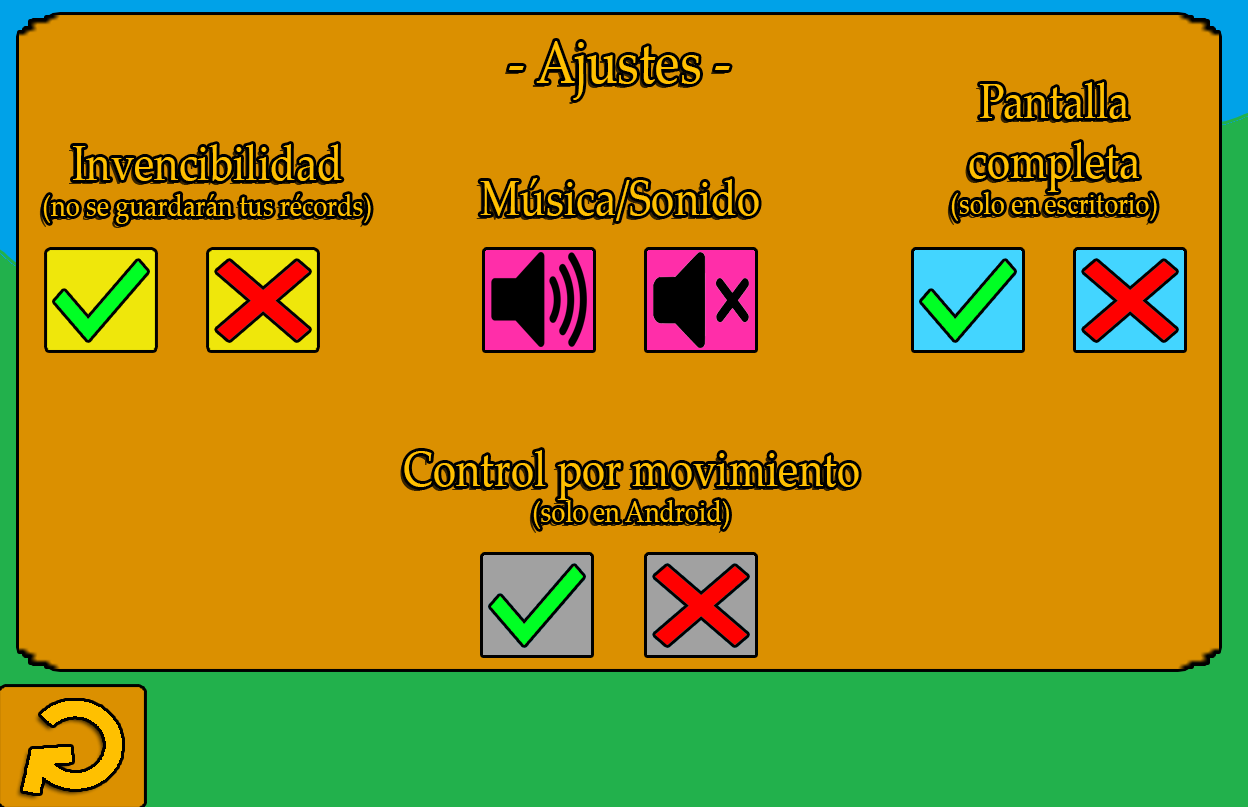
<style>
.page{position:relative;width:1248px;height:807px;background:#db9000}
.page>*{position:absolute;margin:0}
.t1{font:60px "PalatinoLinotype-Roman";color:#ffc000;scale:0.84 1}
.t2{font:30px "PalatinoLinotype-Roman";color:#ffc000;scale:0.84 1}
.t3{font:50px "PalatinoLinotype-Roman";color:#ffc000;scale:0.84 1}
</style>
<div class="page">
<p class="t1" style="left:509px;top:41px;width:221px;height:59px">- Ajustes -</p>
<p class="t2" style="left:951px;top:82px;width:206px;height:139px;text-align:center"><span class="t3">Pantalla<br>completa<br></span>(solo en escritorio)</p>
<p class="t2" style="left:43px;top:144px;width:328px;height:80px;text-align:center"><span class="t3">Invencibilidad<br></span>(no se guardarán tus récords)</p>
<p class="t3" style="left:480px;top:178px;width:279px;height:43px">Música/Sonido</p>
<p class="t3" style="left:404px;top:450px;width:455px;height:79px;text-align:center">Control por movimiento<br><span class="t2">(solo en Android)</span></p>
</div>
